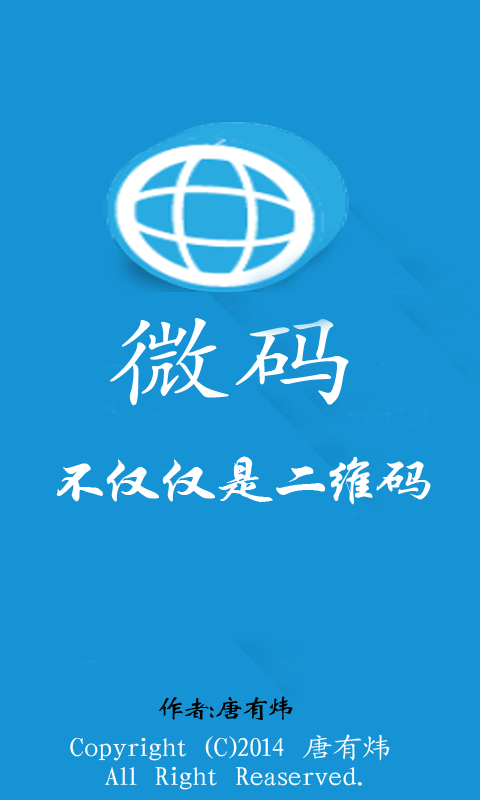
<style>
.page{position:relative;width:480px;height:800px;background:#1693d5}
.page>*{position:absolute;margin:0}
.t1{font:105.5px "STKaiti";letter-spacing:0.06em;color:#ffffff;scale:1.17 1}
.t2{font:53.3px "STXingkai";letter-spacing:0.06em;color:#ffffff;scale:1.17 1}
.t3{font:26.6px "STXinwei";letter-spacing:0.06em;color:#010101;scale:1.17 1}
.t4{font:26.6px "ÃÔÄã¼ò¿¬Ìå_GB2312";letter-spacing:0.06em;color:#ffffff;scale:1.17 1}
</style>
<div class="page">
<p class="t1" style="left:110px;top:318px;width:239px;height:88px">微码</p>
<p class="t2" style="left:56px;top:456px;width:375px;height:49px">不仅仅是二维码</p>
<p class="t3" style="left:159px;top:696px;width:134px;height:24px">作者：唐有炜</p>
<p class="t4" style="left:70px;top:734px;width:320px;height:56px">Copyright (C)2014 唐有炜 <br>  All Right Reaserved.</p>
</div>
